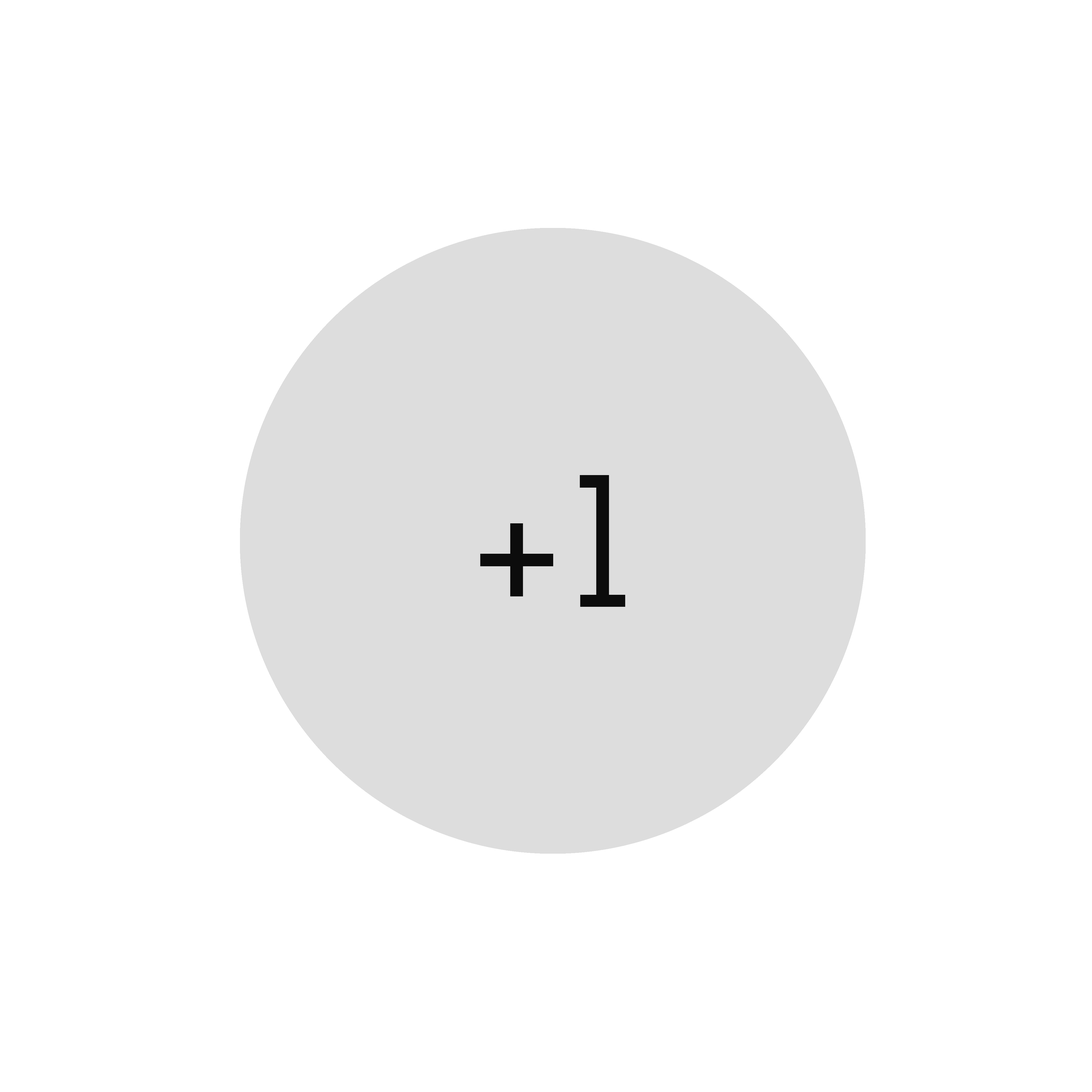
<style>
.page{position:relative;width:1092px;height:1092px;background:#ffffff}
.page>*{position:absolute;margin:0}
.t1{font:202.6px "JosefinSlab-SemiBold";color:#0c0c0c}
</style>
<div class="page">
<p class="t1" style="left:480px;top:475px;width:145px;height:132px">+1</p>
</div>
